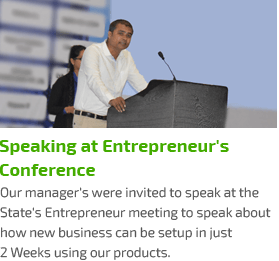
<style>
.page{position:relative;width:279px;height:261px;background:#ffffff}
.page>*{position:absolute;margin:0}
.t1{font:13.5px/20px "Exo2-Light";color:#545454}
</style>
<div class="page">
<p class="t1" style="left:0px;top:187px;width:271px;height:73px">Our manager's were invited to speak at the State's Entrepreneur meeting to speak about how new business can be setup in just<br>2 Weeks using our products.</p>
</div>
